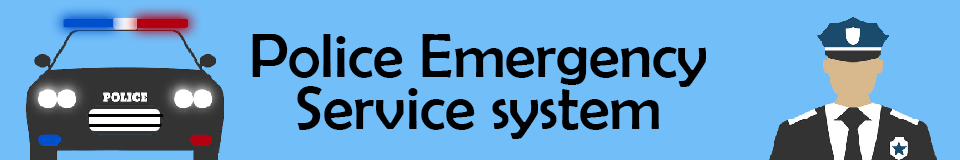
<style>
.page{position:relative;width:960px;height:160px;background:#72bef9}
.page>*{position:absolute;margin:0}
.t1{font:62.6px "BerlinSansFB-Reg";color:#000000}
</style>
<div class="page">
<p class="t1" style="left:252px;top:34px;width:454px;height:105px;text-align:center">Police Emergency<br>Service system</p>
</div>
